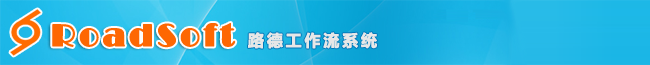
<style>
.page{position:relative;width:650px;height:65px}
.page>*{position:absolute;margin:0}
.t1{font:32px "Broadway";letter-spacing:0.1em;color:#fe6702;font-weight:bold}
.t2{font:16px "MicrosoftYaHei-Bold";letter-spacing:0.15em;color:#e7e7e7;font-weight:bold}
</style>
<div class="page">
<p class="t1" style="left:52px;top:23px;width:184px;height:25px">RoadSoft</p>
<p class="t2" style="left:248px;top:32px;width:130px;height:17px">路德工作流系统</p>
</div>
